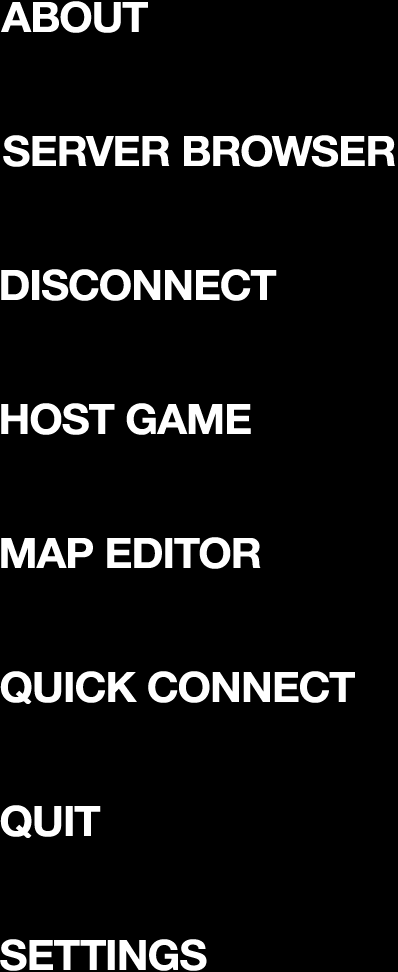
<style>
.page{position:relative;width:398px;height:972px;background:#000000}
.page>*{position:absolute;margin:0}
.t1{font:42px "HelveticaNeueBold";letter-spacing:-0.021em;color:#ffffff;scale:1.03 1}
</style>
<div class="page">
<p class="t1" style="left:1px;top:1px;width:147px;height:32px">ABOUT</p>
<p class="t1" style="left:3px;top:135px;width:392px;height:32px">SERVER BROWSER</p>
<p class="t1" style="left:1px;top:269px;width:276px;height:32px">DISCONNECT</p>
<p class="t1" style="left:1px;top:403px;width:250px;height:32px">HOST GAME</p>
<p class="t1" style="left:1px;top:537px;width:260px;height:32px">MAP EDITOR</p>
<p class="t1" style="left:0px;top:671px;width:355px;height:34px">QUICK CONNECT</p>
<p class="t1" style="left:0px;top:805px;width:101px;height:34px">QUIT</p>
<p class="t1" style="left:0px;top:939px;width:207px;height:32px">SETTINGS</p>
</div>
